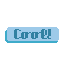
<style>
.page{position:relative;width:64px;height:64px;background:#ffffff}
.page>*{position:absolute;margin:0}
.t1{font:14px "Superscript";color:#3281a2}
</style>
<div class="page">
<p class="t1" style="left:14px;top:29px;width:37px;height:10px">Cool!</p>
</div>
